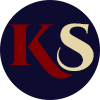
<style>
.page{position:relative;width:100px;height:100px;background:#0e0b30}
.page>*{position:absolute;margin:0}
.t1{font:58px "CinzelDecorative-Black";color:#800000}
.t2{font:58px "CinzelDecorative-Black";color:#e4d6a7}
</style>
<div class="page">
<p class="t1" style="left:9px;top:23px;width:85px;height:56px">K<span class="t2">S</span></p>
</div>
